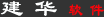
<style>
.page{position:relative;width:104px;height:17px;background:#333333}
.page>*{position:absolute;margin:0}
.t1{font:23px "LiSu";letter-spacing:-0.01em;color:#feffff}
.t2{font:17.9px "LiSu";letter-spacing:-0.01em;color:#fa040a;scale:0.8 1}
</style>
<div class="page">
<p class="t1" style="left:0px;top:1px;width:104px;height:15px">建 华 <span class="t2">软 件</span></p>
</div>
